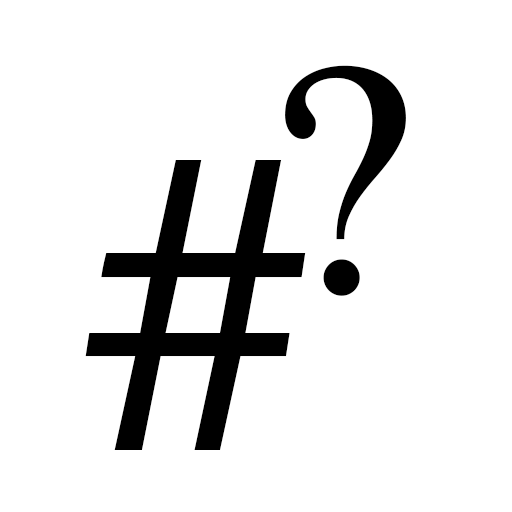
<style>
.page{position:relative;width:512px;height:512px;background:#ffffff}
.page>*{position:absolute;margin:0}
.t1{font:323px "MalayalamMN";color:#000000}
.t2{font:446px "Marion-Regular";color:#000000}
</style>
<div class="page">
<p class="t1" style="left:285px;top:65px;width:121px;height:231px">?</p>
<p class="t2" style="left:85px;top:160px;width:221px;height:290px">#</p>
</div>
